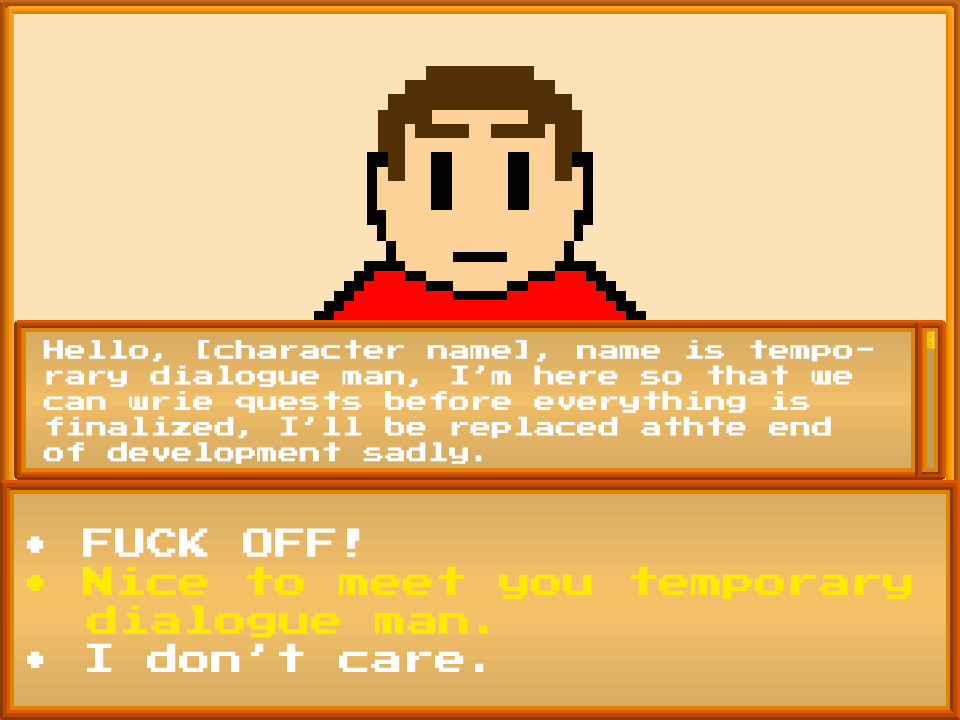
<style>
.page{position:relative;width:960px;height:720px;background:#fbe2b7}
.page>*{position:absolute;margin:0}
.t1{font:21.3px "PressStart2P";color:#ffffff}
</style>
<div class="page">
<p class="t1" style="left:43px;top:340px;width:831px;height:124px">Hello, [character name], name is temporary dialogue man, I’m here so that we can wrie quests before everything is finalized, I’ll be replaced athte end of development sadly.</p>
</div>
